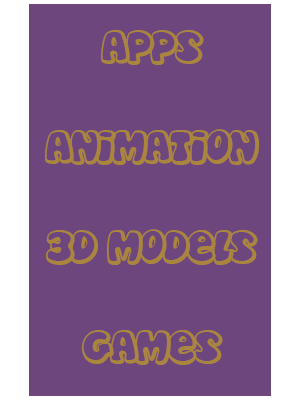
<style>
.page{position:relative;width:300px;height:400px;background:#6e467e}
.page>*{position:absolute;margin:0}
.t1{font:48px/100px "Disko";color:#a9853e}
</style>
<div class="page">
<p class="t1" style="left:44px;top:30px;width:216px;height:335px;text-align:center">apps<br>animation<br>3d models<br>games</p>
</div>
